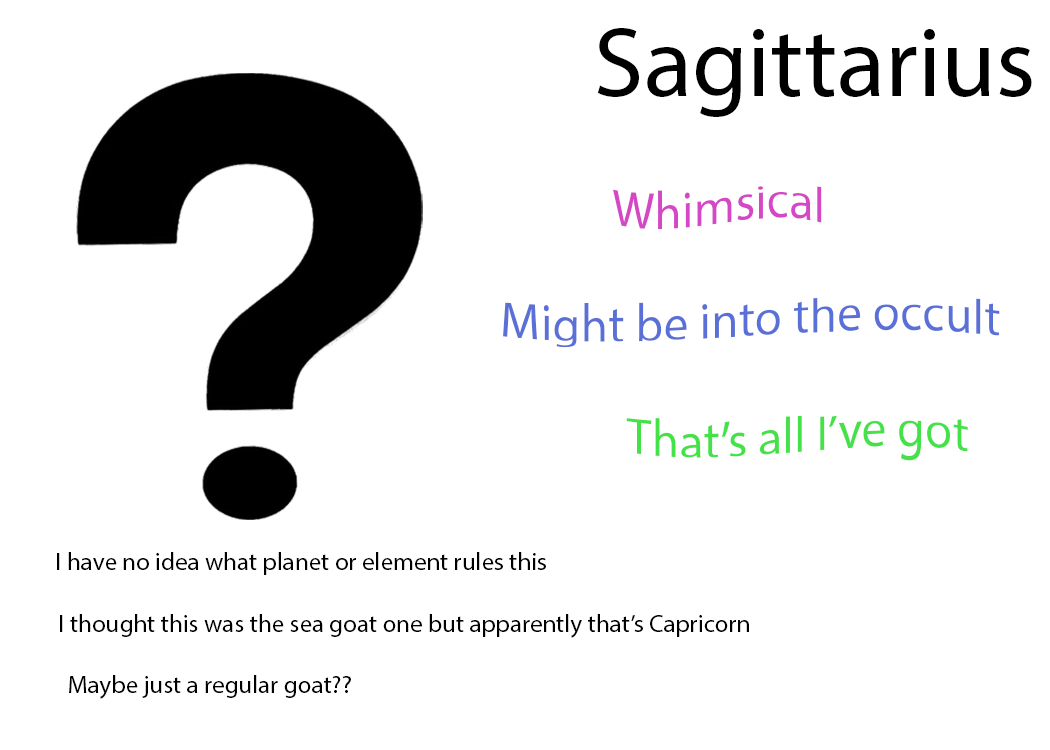
<style>
.page{position:relative;width:1050px;height:750px;background:#ffffff}
.page>*{position:absolute;margin:0}
.t1{font:100px "MyriadPro-Regular";color:#000000}
.t2{font:50px "MyriadPro-Regular";color:#d447c5}
.t3{font:50px "MyriadPro-Regular";color:#5b70d6}
.t4{font:50px "MyriadPro-Regular";color:#44e248}
.t5{font:25px "MyriadPro-Regular";color:#000000}
</style>
<div class="page">
<p class="t1" style="left:597px;top:28px;width:435px;height:89px">Sagittarius</p>
<p class="t2" style="left:613px;top:186px;width:209px;height:44px">Whimsical</p>
<p class="t3" style="left:503px;top:298px;width:497px;height:50px">Might be into the occult</p>
<p class="t4" style="left:626px;top:415px;width:342px;height:46px">That’s all I’ve got</p>
<p class="t5" style="left:57px;top:552px;width:489px;height:23px">I have no idea what planet or element rules this</p>
<p class="t5" style="left:60px;top:614px;width:689px;height:24px">I thought this was the sea goat one but apparently that’s Capricorn</p>
<p class="t5" style="left:69px;top:675px;width:282px;height:24px">Maybe just a regular goat??</p>
</div>
